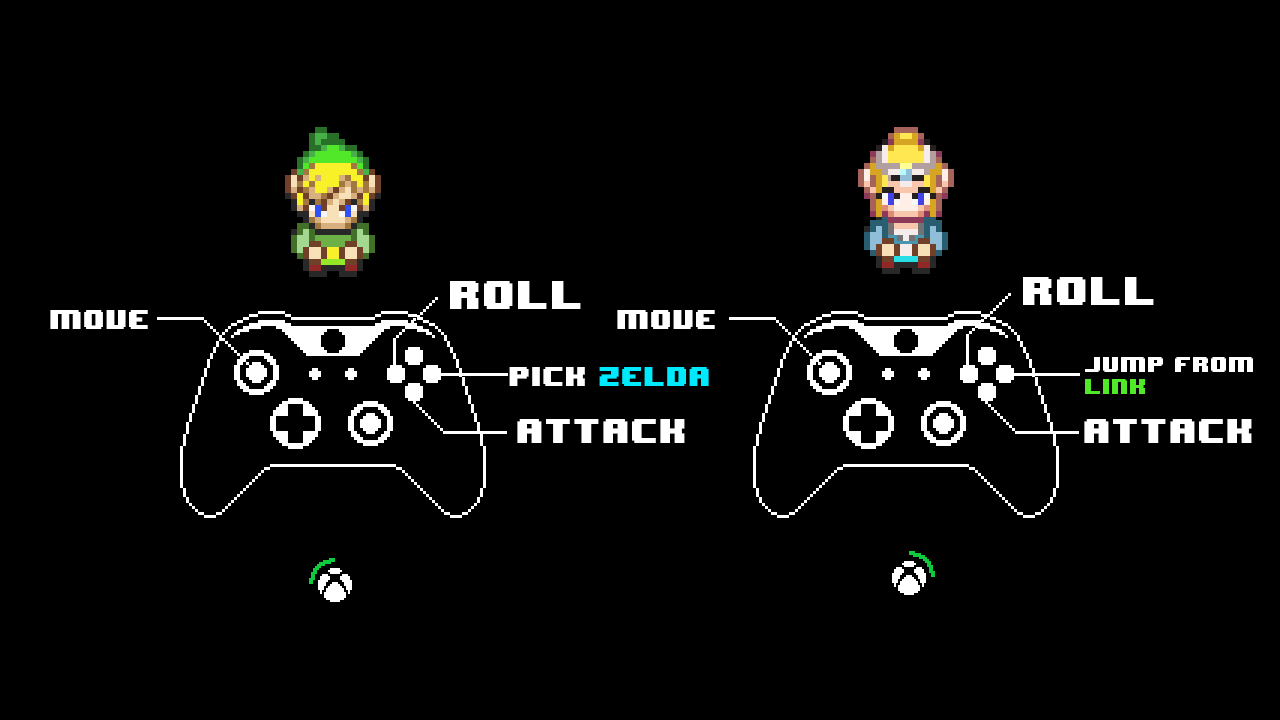
<style>
.page{position:relative;width:1280px;height:720px;background:#000000}
.page>*{position:absolute;margin:0}
.t1{font:33.9px "8BITWONDERNominal";color:#ffffff}
.t2{font:22.4px "8BITWONDERNominal";color:#ffffff}
.t3{font:18px "8BITWONDERNominal";color:#ffffff}
.t4{font:18px "8BITWONDERNominal";color:#50e828}
.t5{font:22.5px "8BITWONDERNominal";color:#00eaff}
.t6{font:22.5px "8BITWONDERNominal";color:#ffffff}
.t7{font:28.6px "8BITWONDERNominal";color:#ffffff}
</style>
<div class="page">
<p class="t1" style="left:450px;top:281px;width:131px;height:28px">ROLL</p>
<p class="t1" style="left:1023px;top:277px;width:131px;height:28px">ROLL</p>
<p class="t2" style="left:50px;top:310px;width:98px;height:19px">move</p>
<p class="t2" style="left:617px;top:310px;width:98px;height:19px">move</p>
<p class="t3" style="left:1085px;top:357px;width:168px;height:37px">jump from<br><span class="t4">lInK</span></p>
<p class="t5" style="left:509px;top:367px;width:200px;height:19px"><span class="t6">pick </span>zelda</p>
<p class="t7" style="left:517px;top:419px;width:168px;height:24px">attack</p>
<p class="t7" style="left:1084px;top:419px;width:168px;height:24px">attack</p>
</div>
